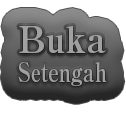
<style>
.page{position:relative;width:126px;height:115px;background:#ffffff}
.page>*{position:absolute;margin:0}
.t1{font:27px/37px "RyuminPro-ExBold";color:#a1a1a1;scale:0.77 1}
.t2{font:36px/37px "RyuminPro-ExBold";color:#a1a1a1}
</style>
<div class="page">
<p class="t1" style="left:18px;top:26px;width:89px;height:60px;text-align:center"><span class="t2">Buka<br></span>Setengah</p>
</div>
